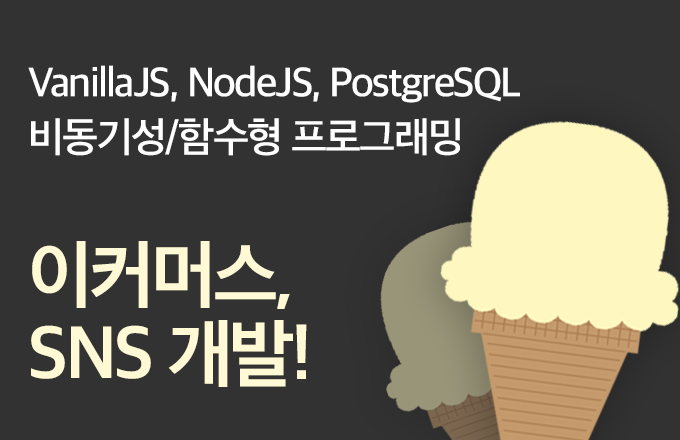
<style>
.page{position:relative;width:680px;height:440px;background:#323232}
.page>*{position:absolute;margin:0}
.t1{font:41.7px/54.2px "AppleSDGothicNeo-SemiBold";letter-spacing:-0.04em;color:#ffffff}
.t2{font:75px/79.2px "AppleSDGothicNeo-Bold";letter-spacing:-0.04em;color:#fffad5}
</style>
<div class="page">
<p class="t1" style="left:28px;top:65px;width:492px;height:322px">VanillaJS, NodeJS, PostgreSQL<br>비동기성/함수형 프로그래밍<br><br><span class="t2">이커머스,<br>SNS 개발!</span></p>
</div>
